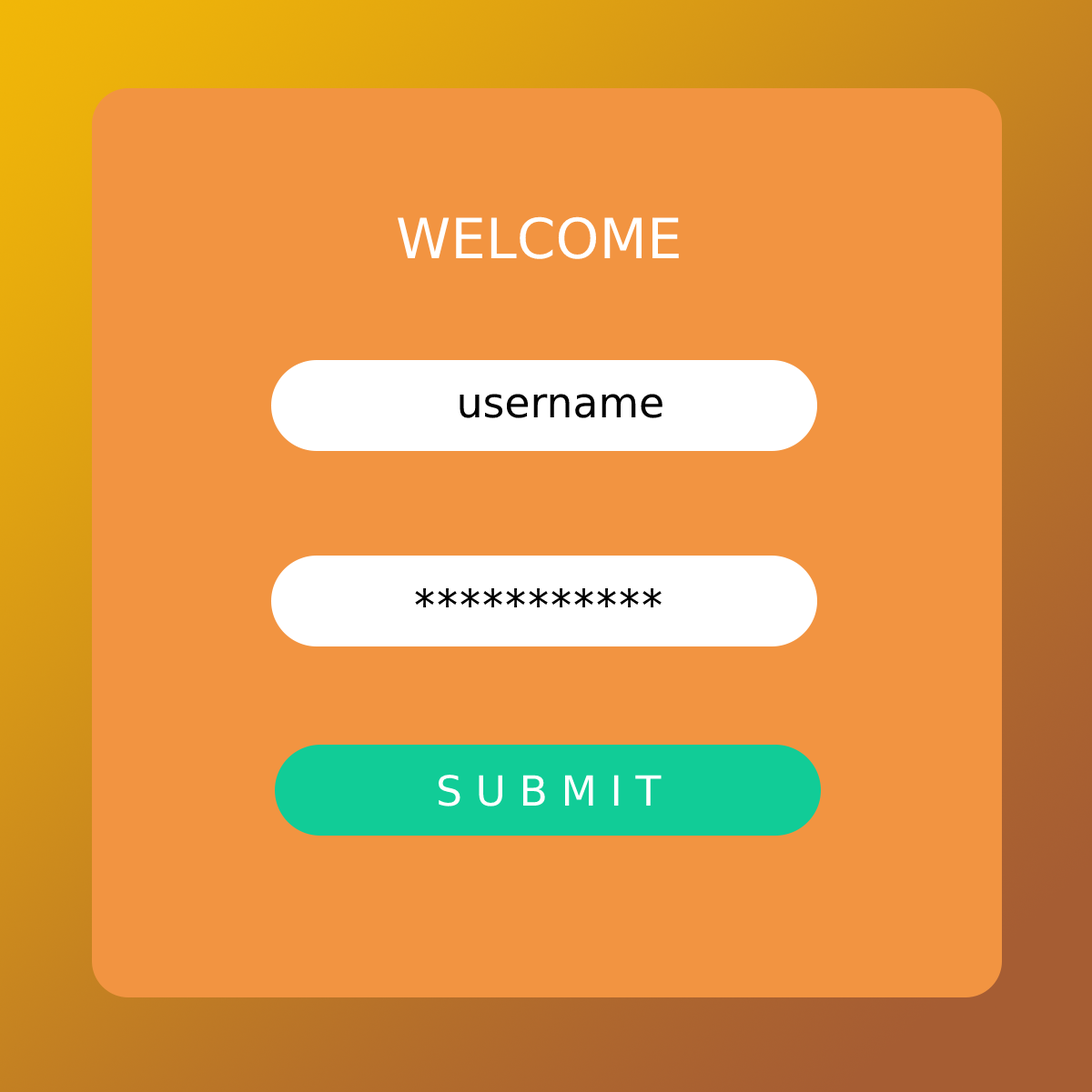
<style>
.page{position:relative;width:1092px;height:1092px;background:#f29441}
.page>*{position:absolute;margin:0}
.t1{font:55.5px "Tahoma";color:#ffffff}
.t2{font:41.6px "Tahoma";color:#010101}
.t3{font:41.6px "Tahoma";color:#000000}
.t4{font:41.6px "Tahoma";color:#ffffff}
</style>
<div class="page">
<p class="t1" style="left:397px;top:216px;width:282px;height:43px">WELCOME</p>
<p class="t2" style="left:459px;top:394px;width:203px;height:24px">username</p>
<p class="t3" style="left:415px;top:589px;width:246px;height:19px">*******************</p>
<p class="t4" style="left:438px;top:775px;width:223px;height:32px">S U B M I T</p>
</div>
